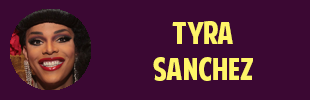
<style>
.page{position:relative;width:310px;height:100px;background:#3b0833}
.page>*{position:absolute;margin:0}
.t1{font:30px "AmericanPurpose";color:#fff568}
.t2{font:24px "Tahoma";color:#ffffff}
</style>
<div class="page">
<p class="t1" style="left:153px;top:21px;width:100px;height:60px;text-align:center"><span class="t2"><br></span>Tyra <br>Sanchez</p>
</div>
